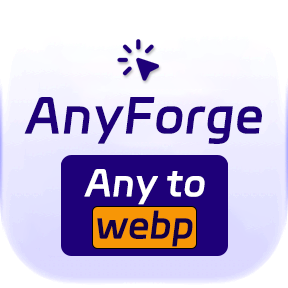
<style>
.page{position:relative;width:288px;height:288px;background:#ffffff}
.page>*{position:absolute;margin:0}
.t1{font:48px "DingTalk-JinBuTi";letter-spacing:0.01em;color:#1e0079;font-weight:bold}
.t2{font:36px "DingTalk-JinBuTi";color:#ffffff;font-weight:bold}
.t3{font:36px "DingTalk-JinBuTi";color:#110044;font-weight:bold}
</style>
<div class="page">
<p class="t1" style="left:24px;top:97px;width:238px;height:47px">AnyForge</p>
<p class="t2" style="left:84px;top:169px;width:121px;height:36px">Any to</p>
<p class="t3" style="left:97px;top:210px;width:96px;height:37px">webp</p>
</div>
